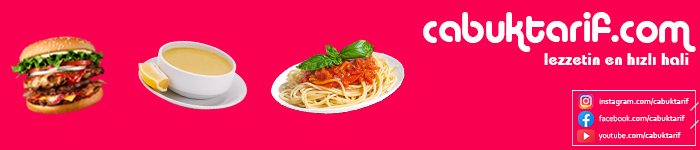
<style>
.page{position:relative;width:700px;height:150px;background:#fa0050}
.page>*{position:absolute;margin:0}
.t1{font:16.7px "BahamasBold";color:#ffffff}
.t2{font:41.7px "Alba";color:#ffffff}
.t3{font:8.3px "Corbel";color:#ffffff}
.t4{font:8.3px "CorbelLight";color:#ffffff}
</style>
<div class="page">
<p class="t1" style="left:423px;top:12px;width:273px;height:53px;text-align:right"><span class="t2">cabuktarif.com<br></span>lezzetin en hızlı hali</p>
<p class="t3" style="left:599px;top:98px;width:90px;height:8px"><span class="t4">i</span>nstagram.com/cabuktarif</p>
<p class="t3" style="left:599px;top:115px;width:86px;height:7px"><span class="t4">facebook</span>.com/cabuktarif</p>
<p class="t3" style="left:598px;top:132px;width:83px;height:9px"><span class="t4">youtube</span>.com/cabuktarif</p>
</div>
